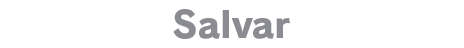
<style>
.page{position:relative;width:464px;height:48px;background:#ffffff}
.page>*{position:absolute;margin:0}
.t1{font:36px "RodinPro-EB";letter-spacing:-0.002em;color:#8b8c92}
</style>
<div class="page">
<p class="t1" style="left:173px;top:9px;width:117px;height:30px">Salvar</p>
</div>
